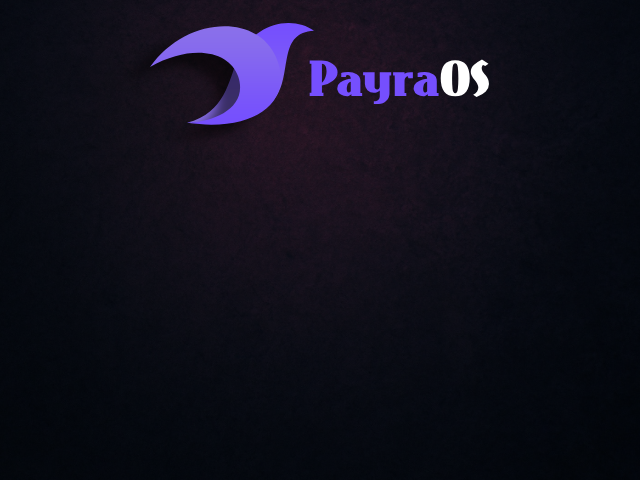
<style>
.page{position:relative;width:640px;height:480px}
.page>*{position:absolute;margin:0}
.t1{font:49px "EastMarket";color:#754ffe}
.t2{font:49px "EastMarket";color:#ffffff}
</style>
<div class="page">
<p class="t1" style="left:309px;top:59px;width:180px;height:46px">Payra<span class="t2">OS</span></p>
</div>
